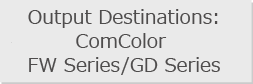
<style>
.page{position:relative;width:253px;height:84px;background:#eaeaea}
.page>*{position:absolute;margin:0}
.t1{font:19px/24px "Meiryo";color:#4e4c4c}
</style>
<div class="page">
<p class="t1" style="left:28px;top:9px;width:192px;height:66px;text-align:center">Output Destinations:<br>ComColor <br>FW Series/GD Series</p>
</div>
